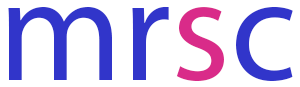
<style>
.page{position:relative;width:300px;height:87px;background:#ffffff}
.page>*{position:absolute;margin:0}
.t1{font:149.4px "MyriadPro-Regular";color:#3135ca}
.t2{font:149.4px "MyriadPro-Regular";color:#d92b89}
</style>
<div class="page">
<p class="t1" style="left:8px;top:6px;width:285px;height:75px">mr<span class="t2">s</span>c</p>
</div>
